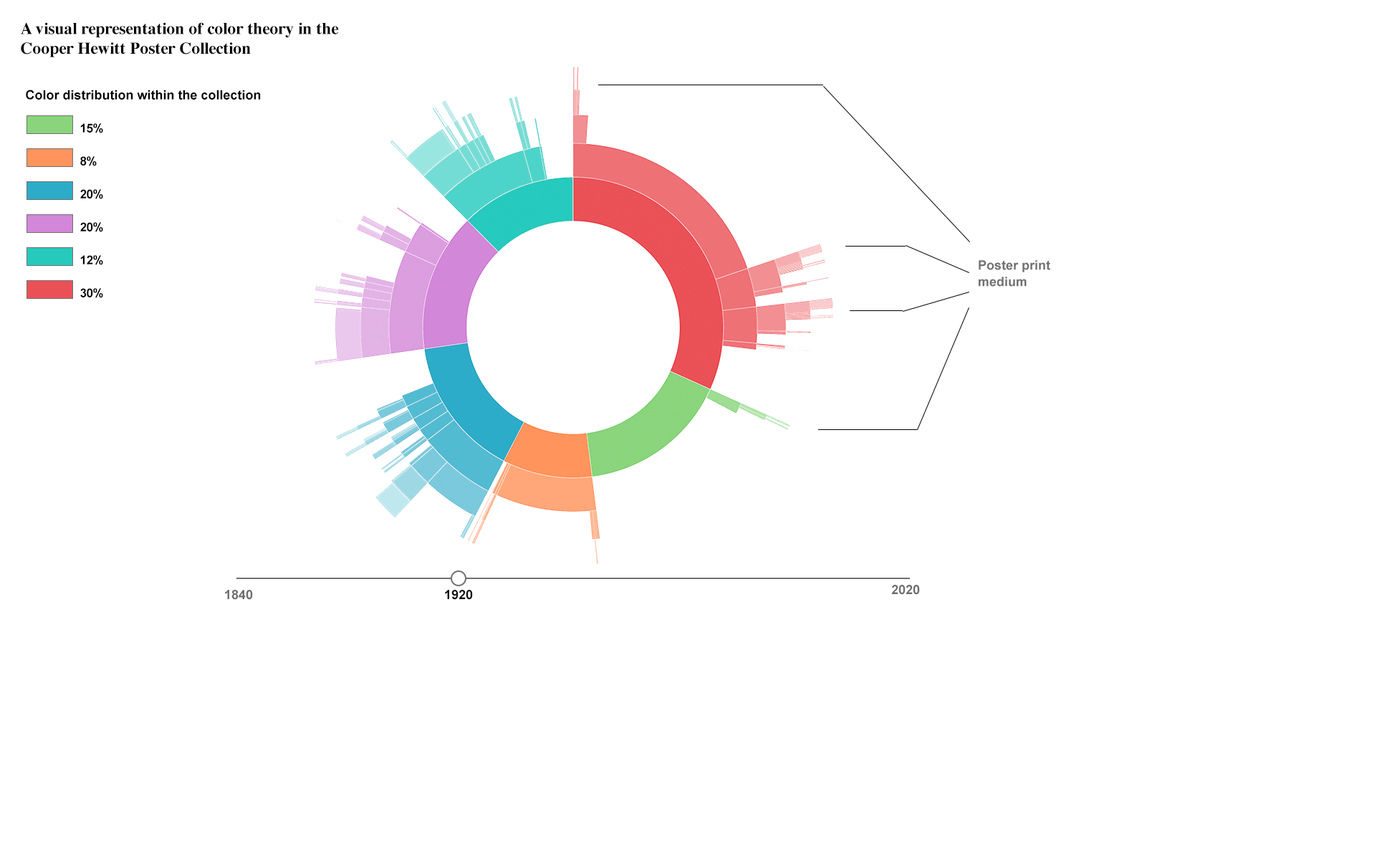
<style>
.page{position:relative;width:1387px;height:860px;background:#ffffff}
.page>*{position:absolute;margin:0}
.t1{font:16.5px "Times-Bold";color:#000000}
.t2{font:12.9px "Arial-BoldMT";color:#000000}
.t3{font:12.2px/16.5px "Arial-BoldMT";color:#000000}
.t4{font:12.9px/16.5px "Arial-BoldMT";color:#000000}
.t5{font:12.9px/16.5px "Arial-BoldMT";color:#707070}
.t6{font:12.9px "Arial-BoldMT";color:#6f6d6d}
.t7{font:12.9px "Arial-BoldMT";color:#0d0d0d}
</style>
<div class="page">
<p class="t1" style="left:21px;top:22px;width:318px;height:35px">A visual representation of color theory in the Cooper Hewitt Poster Collection</p>
<p class="t2" style="left:26px;top:90px;width:235px;height:10px">Color distribution within the collection</p>
<p class="t3" style="left:80px;top:123px;width:23px;height:175px"><span class="t4"><br><br></span>15%<br><br>8%<br><br>20%<br><br>20%<br><br>12%<br><br>30%</p>
<p class="t5" style="left:979px;top:260px;width:71px;height:27px">Poster print medium</p>
<p class="t6" style="left:225px;top:590px;width:28px;height:10px">1840</p>
<p class="t7" style="left:445px;top:590px;width:28px;height:10px">1920</p>
<p class="t6" style="left:891px;top:585px;width:29px;height:10px">2020</p>
</div>
